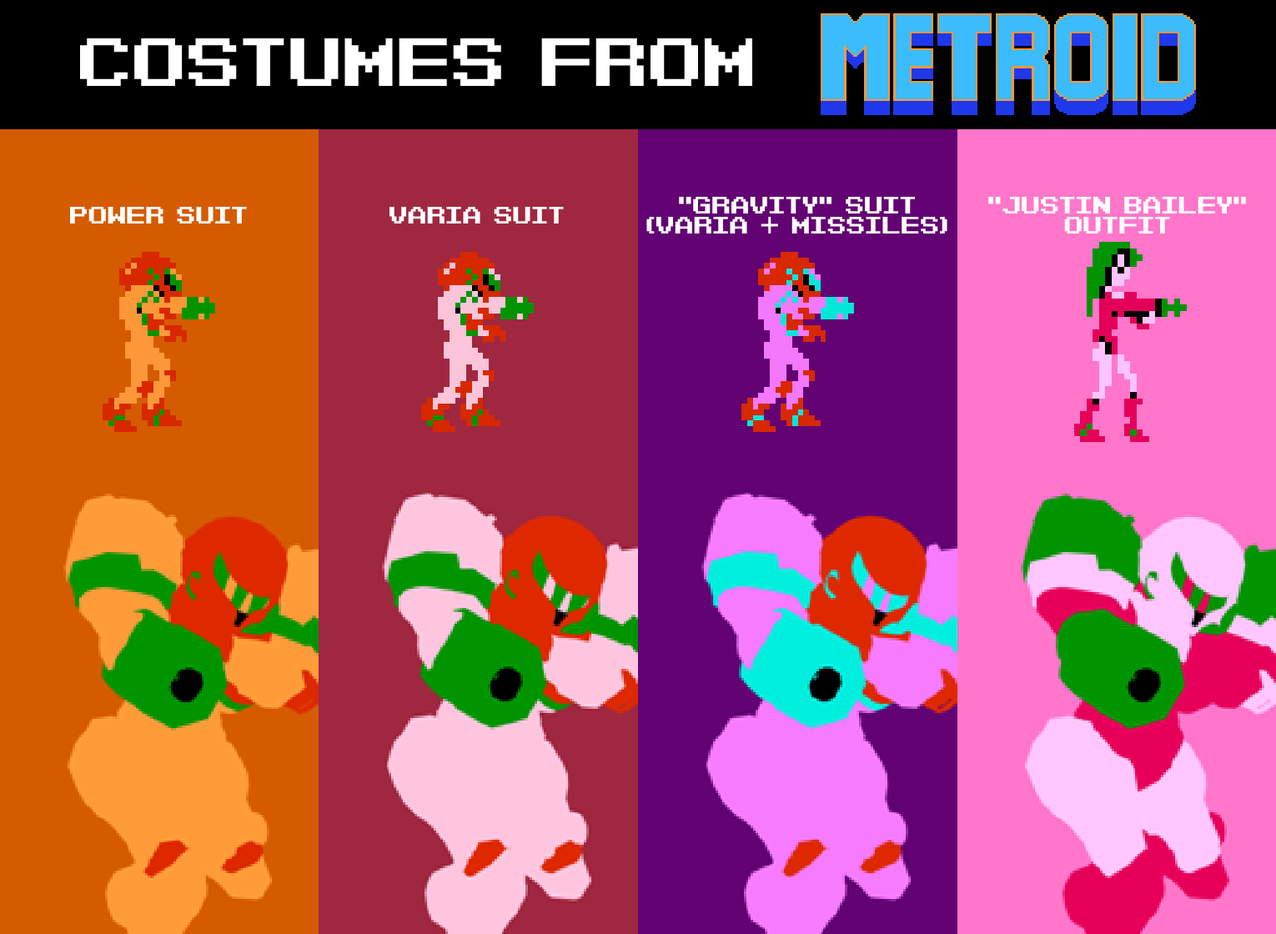
<style>
.page{position:relative;width:1276px;height:934px}
.page>*{position:absolute;margin:0}
.t1{font:47.5px "Barcade-Brawl";color:#ffffff}
.t2{font:16.7px "Barcade-Brawl";color:#ffffff}
</style>
<div class="page">
<p class="t1" style="left:80px;top:38px;width:673px;height:48px">COSTUMES FROM</p>
<p class="t2" style="left:646px;top:197px;width:302px;height:37px;text-align:center">"Gravity" Suit<br>(Varia + Missiles)</p>
<p class="t2" style="left:989px;top:197px;width:257px;height:37px;text-align:center">"Justin Bailey"<br>OutFit</p>
<p class="t2" style="left:70px;top:207px;width:177px;height:17px">Power Suit</p>
<p class="t2" style="left:390px;top:207px;width:174px;height:17px">Varia Suit</p>
</div>
